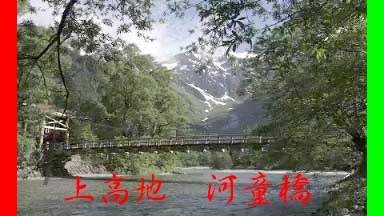
<style>
.page{position:relative;width:384px;height:216px}
.page>*{position:absolute;margin:0}
.t1{font:36px "DFGyoSho-Lt-MP-RKSJ-H";color:#ff0000}
</style>
<div class="page">
<p class="t1" style="left:63px;top:171px;width:247px;height:35px">上高地　河童橋</p>
</div>
